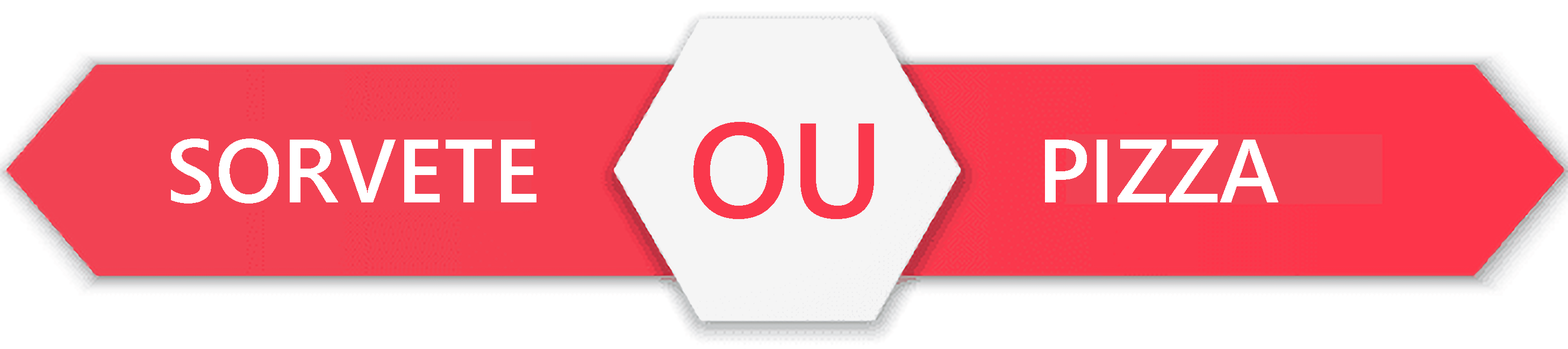
<style>
.page{position:relative;width:1568px;height:349px;background:#ffffff}
.page>*{position:absolute;margin:0}
.t1{font:134.4px "SegoeUI-Semibold";color:#fa384c}
.t2{font:89.6px "SegoeUI-Semibold";color:#ffffff}
</style>
<div class="page">
<p class="t1" style="left:693px;top:122px;width:181px;height:97px">OU</p>
<p class="t2" style="left:171px;top:139px;width:365px;height:65px">SORVETE</p>
<p class="t2" style="left:1045px;top:140px;width:233px;height:63px">PIZZA</p>
</div>
